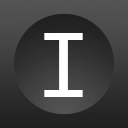
<style>
.page{position:relative;width:128px;height:128px}
.page>*{position:absolute;margin:0}
.t1{font:100px "Consolas";color:#ffffff}
</style>
<div class="page">
<p class="t1" style="left:44px;top:33px;width:39px;height:64px">I</p>
</div>
